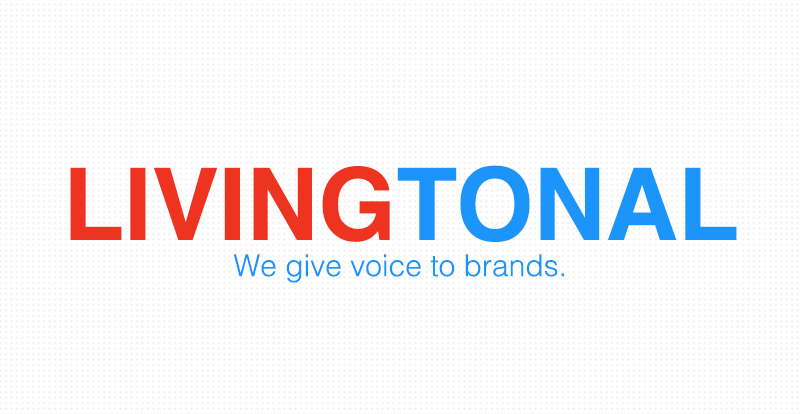
<style>
.page{position:relative;width:800px;height:414px;background:#ffffff}
.page>*{position:absolute;margin:0}
.t1{font:100px "Helvetica-Bold";color:#ee3320}
.t2{font:100px "Helvetica-Bold";color:#1b95fa}
.t3{font:30px "Helvetica-Light";color:#1b95fa}
</style>
<div class="page">
<p class="t1" style="left:70px;top:165px;width:667px;height:77px">LIVING<span class="t2">TONAL</span></p>
<p class="t3" style="left:233px;top:254px;width:331px;height:29px">We give voice to brands.</p>
</div>
